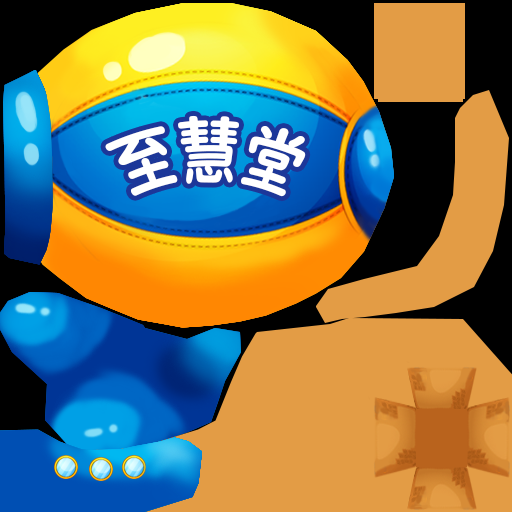
<style>
.page{position:relative;width:512px;height:512px;background:#e39c45}
.page>*{position:absolute;margin:0}
.t1{font:60.5px "ç»å¸ç²åç®-regular";letter-spacing:0.05em;color:#ffffff}
</style>
<div class="page">
<p class="t1" style="left:105px;top:115px;width:201px;height:82px">至慧堂</p>
</div>
